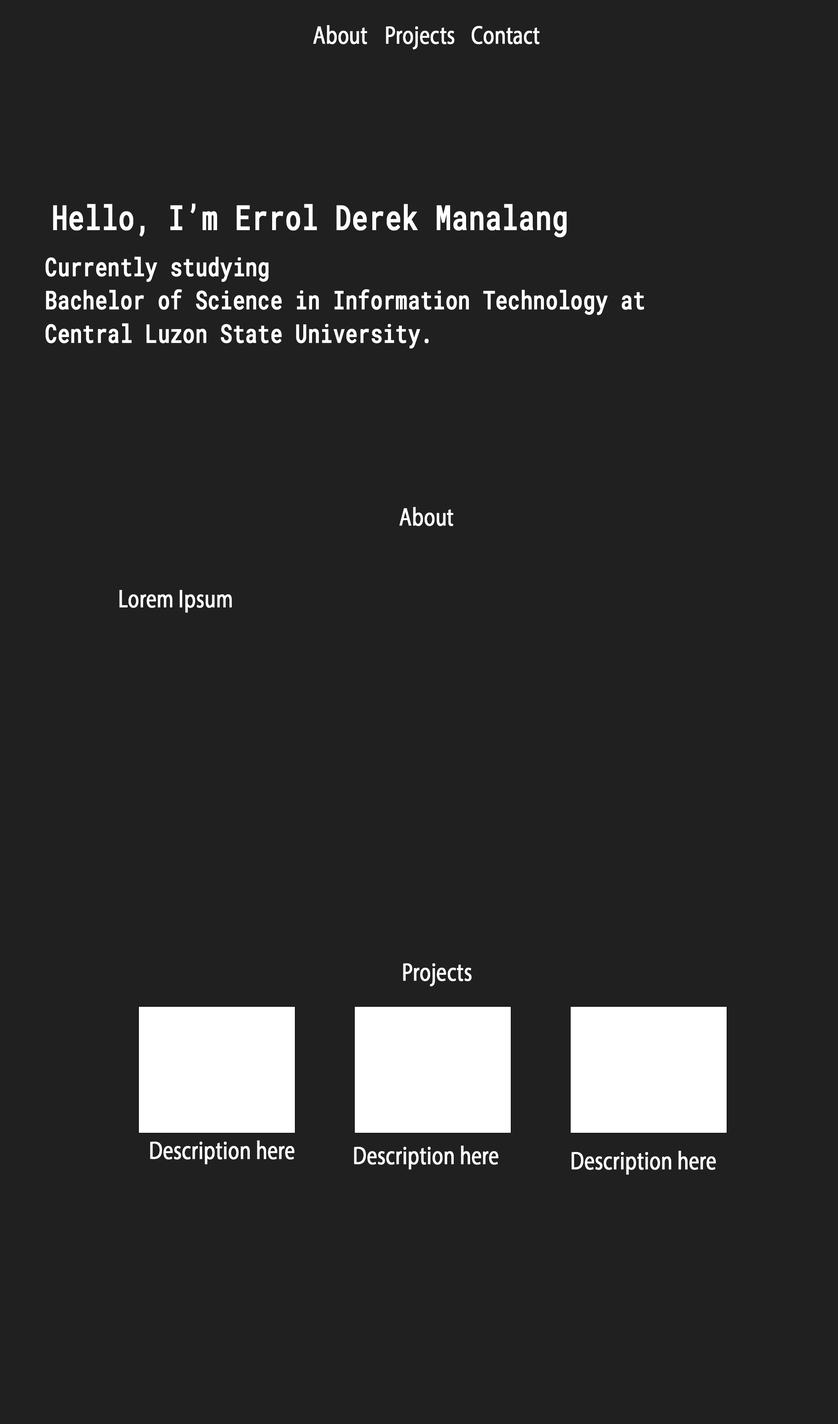
<style>
.page{position:relative;width:838px;height:1424px;background:#202020}
.page>*{position:absolute;margin:0}
.t1{font:25.7px "MyriadPro-Regular";color:#ffffff;font-weight:bold;scale:0.78 1}
.t2{font:34.3px "RobotoMono-Medium";color:#ffffff;font-weight:bold;scale:0.78 1}
.t3{font:25.7px/16.6px "RobotoMono-Medium";color:#ffffff;font-weight:bold;scale:0.78 1}
</style>
<div class="page">
<p class="t1" style="left:313px;top:25px;width:226px;height:24px">About  Projects  Contact</p>
<p class="t2" style="left:53px;top:203px;width:513px;height:34px">Hello, I’m Errol Derek Manalang</p>
<p class="t3" style="left:45px;top:256px;width:599px;height:93px">Currently studying <br><br>Bachelor of Science in Information Technology at <br><br>Central Luzon State University.</p>
<p class="t1" style="left:399px;top:507px;width:54px;height:19px">About</p>
<p class="t1" style="left:119px;top:590px;width:113px;height:23px">Lorem Ipsum</p>
<p class="t1" style="left:403px;top:963px;width:68px;height:23px">Projects</p>
<p class="t1" style="left:150px;top:1140px;width:144px;height:24px">Description here</p>
<p class="t1" style="left:354px;top:1145px;width:144px;height:24px">Description here</p>
<p class="t1" style="left:571px;top:1151px;width:144px;height:24px">Description here</p>
</div>
